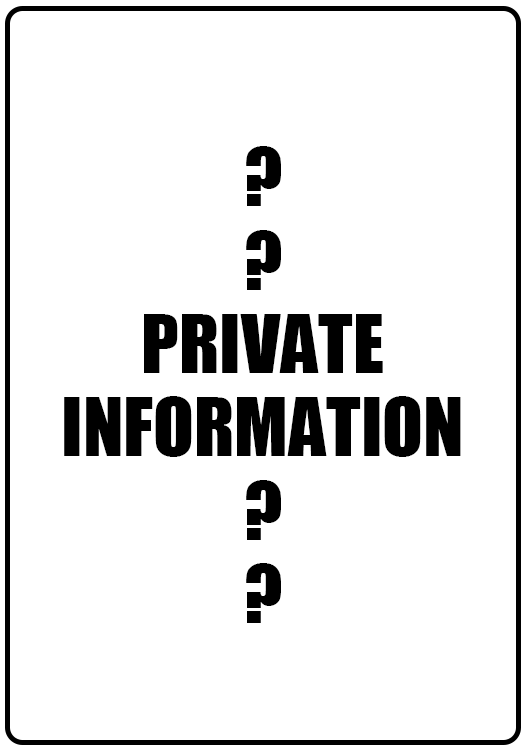
<style>
.page{position:relative;width:525px;height:750px;background:#ffffff}
.page>*{position:absolute;margin:0}
.t1{font:75px/83.3px "Impact";color:#000000}
</style>
<div class="page">
<p class="t1" style="left:64px;top:146px;width:397px;height:477px;text-align:center">?<br>?<br>PRIVATE<br>INFORMATION<br>?<br>?</p>
</div>
